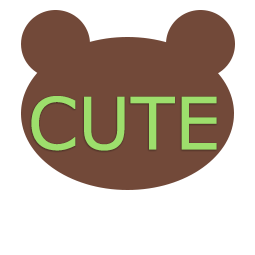
<style>
.page{position:relative;width:255px;height:255px;background:#ffffff}
.page>*{position:absolute;margin:0}
.t1{font:72px "MSReferenceSansSerif";color:#9ddf6c}
</style>
<div class="page">
<p class="t1" style="left:31px;top:96px;width:186px;height:55px">CUTE</p>
</div>
